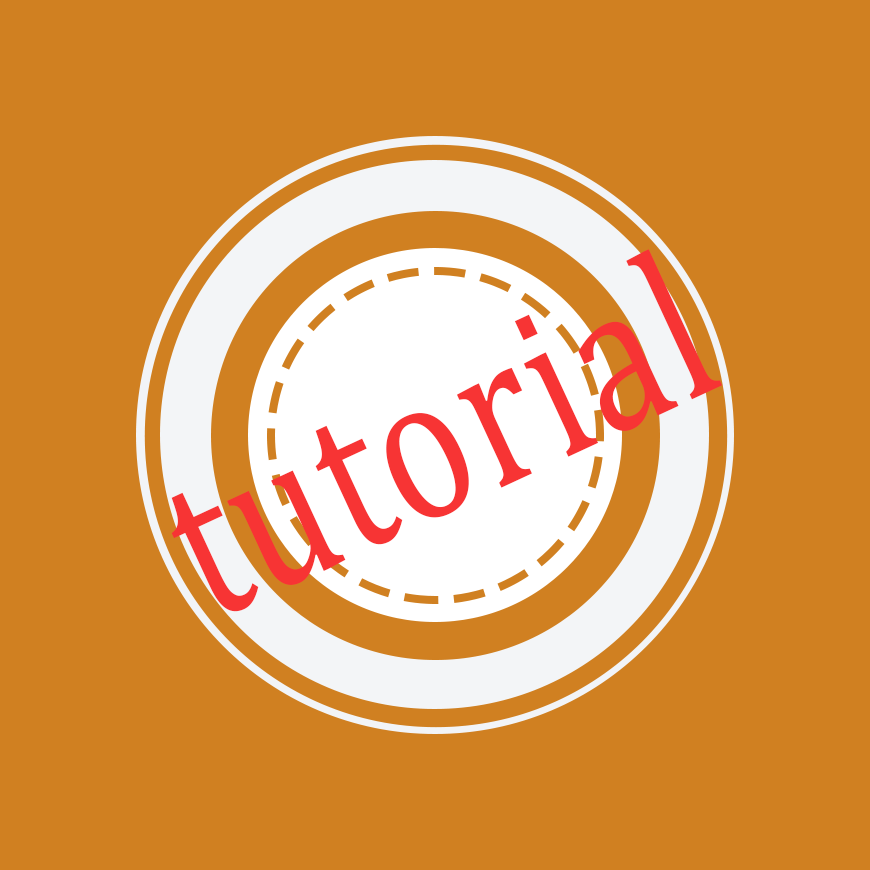
<style>
.page{position:relative;width:870px;height:870px;background:#d08021}
.page>*{position:absolute;margin:0}
.t1{font:220.8px "Cambria";letter-spacing:0.02em;color:#f73434;scale:0.77 1}
</style>
<div class="page">
<p class="t1" style="left:171px;top:249px;width:552px;height:363px;rotate:-25deg">tutorial</p>
</div>
